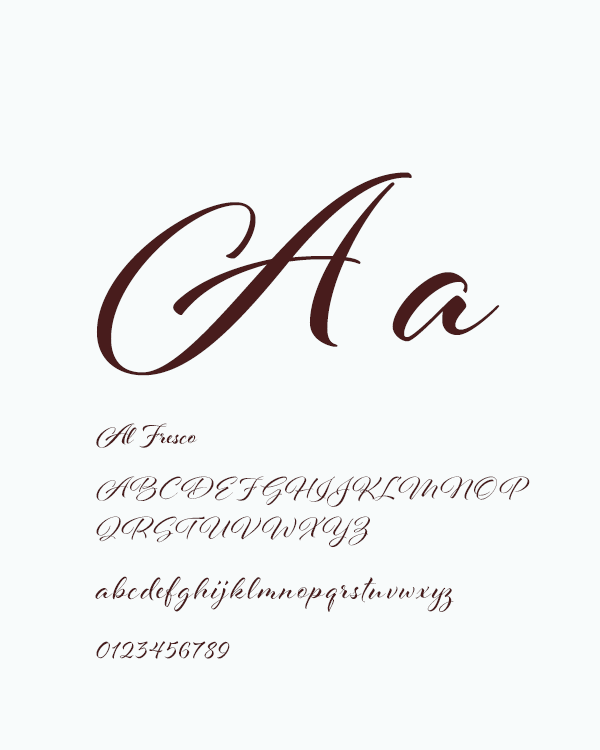
<style>
.page{position:relative;width:600px;height:750px;background:#f8fbfb}
.page>*{position:absolute;margin:0}
.t1{font:250px "AlFresco";color:#481c1c}
.t2{font:30px "AlFresco-Bold";color:#481c1c}
.t3{font:30px/40px "AlFresco";letter-spacing:0.05em;color:#481c1c}
.t4{font:40px "AlFresco";letter-spacing:0.05em;color:#481c1c}
.t5{font:30px "AlFresco";letter-spacing:0.05em;color:#481c1c}
</style>
<div class="page">
<p class="t1" style="left:96px;top:172px;width:404px;height:204px">A a</p>
<p class="t2" style="left:96px;top:423px;width:102px;height:25px">Al Fresco</p>
<p class="t3" style="left:96px;top:476px;width:434px;height:72px">ABCDEFGHIJKLMNOP<br>QRSTUVWXYZ</p>
<p class="t4" style="left:95px;top:576px;width:359px;height:36px">abcdefghijklmnopqrstuvwxyz</p>
<p class="t5" style="left:96px;top:641px;width:134px;height:18px">0123456789</p>
</div>
